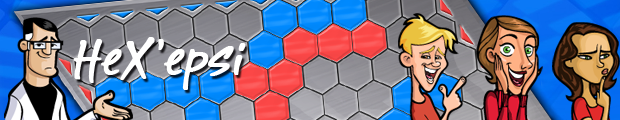
<style>
.page{position:relative;width:620px;height:120px}
.page>*{position:absolute;margin:0}
.t1{font:55px "Aspire";color:#ffffff;font-weight:bold}
</style>
<div class="page">
<p class="t1" style="left:73px;top:37px;width:173px;height:53px">HeX’epsi</p>
</div>
